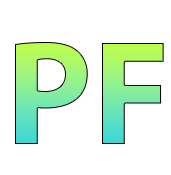
<style>
.page{position:relative;width:171px;height:175px;background:#ffffff}
.page>*{position:absolute;margin:0}
.t1{font:150px "MyriadPro-Bold"}
</style>
<div class="page">
<p class="t1" style="left:15px;top:42px;width:149px;height:102px">PF</p>
</div>
